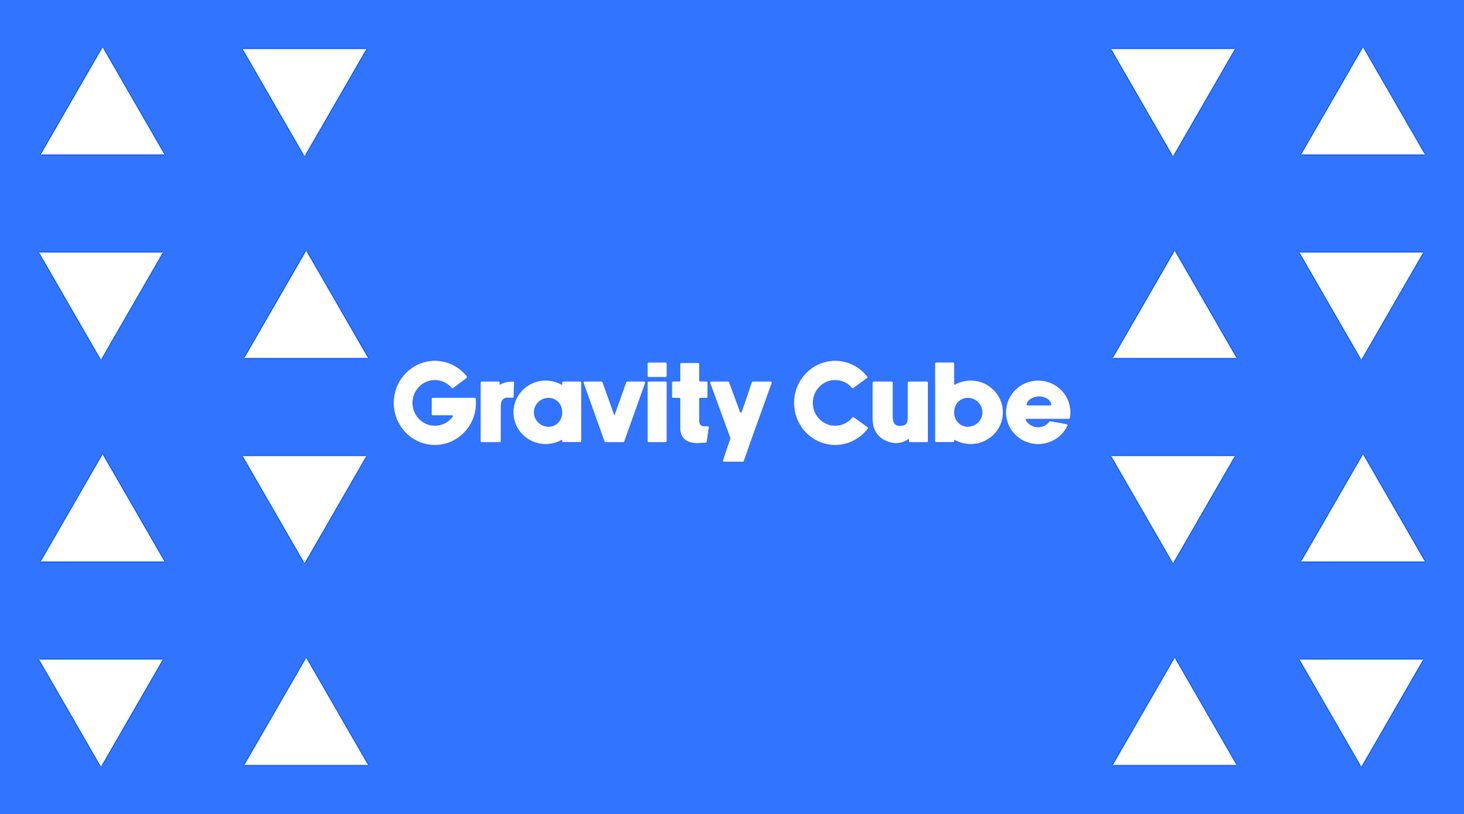
<style>
.page{position:relative;width:1464px;height:814px;background:#3174ff}
.page>*{position:absolute;margin:0}
.t1{font:114.4px "NewakeDemo";color:#ffffff}
</style>
<div class="page">
<p class="t1" style="left:393px;top:361px;width:678px;height:101px">Gravity Cube</p>
</div>
